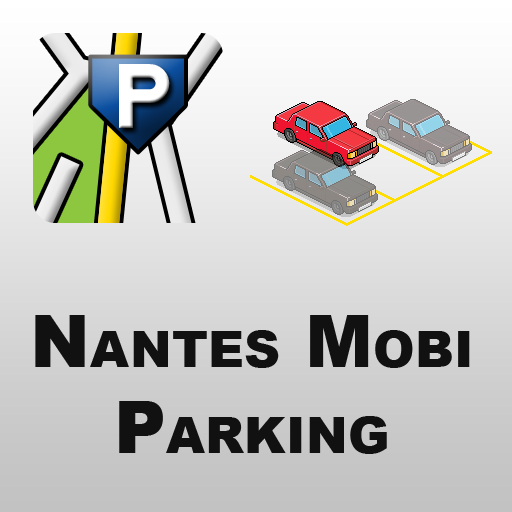
<style>
.page{position:relative;width:512px;height:512px}
.page>*{position:absolute;margin:0}
.t1{font:93.5px "TAPEMAN";color:#ffffff}
.t2{font:72px "Arial-Black";color:#111111;font-variant:small-caps}
</style>
<div class="page">
<p class="t1" style="left:119px;top:64px;width:51px;height:64px">P</p>
<p class="t2" style="left:35px;top:315px;width:435px;height:139px;text-align:center">Nantes Mobi<br>Parking</p>
</div>
